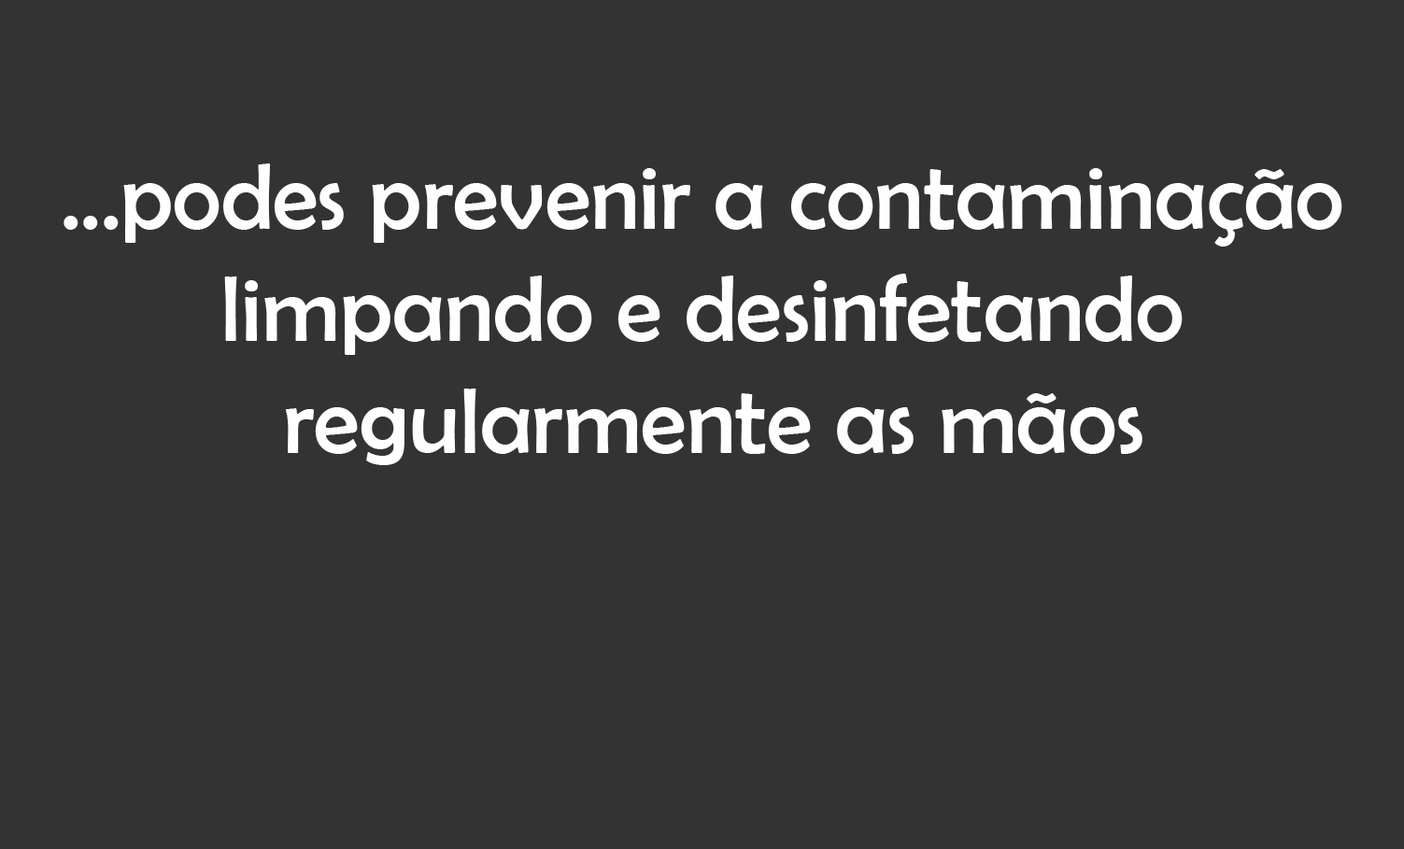
<style>
.page{position:relative;width:1404px;height:849px;background:#333333}
.page>*{position:absolute;margin:0}
.t1{font:93.4px "BerlinSansFB-Reg";color:#fefefe}
</style>
<div class="page">
<p class="t1" style="left:64px;top:163px;width:1278px;height:302px;text-align:center">...podes prevenir a contaminação <br>limpando e desinfetando <br>regularmente as mãos</p>
</div>
